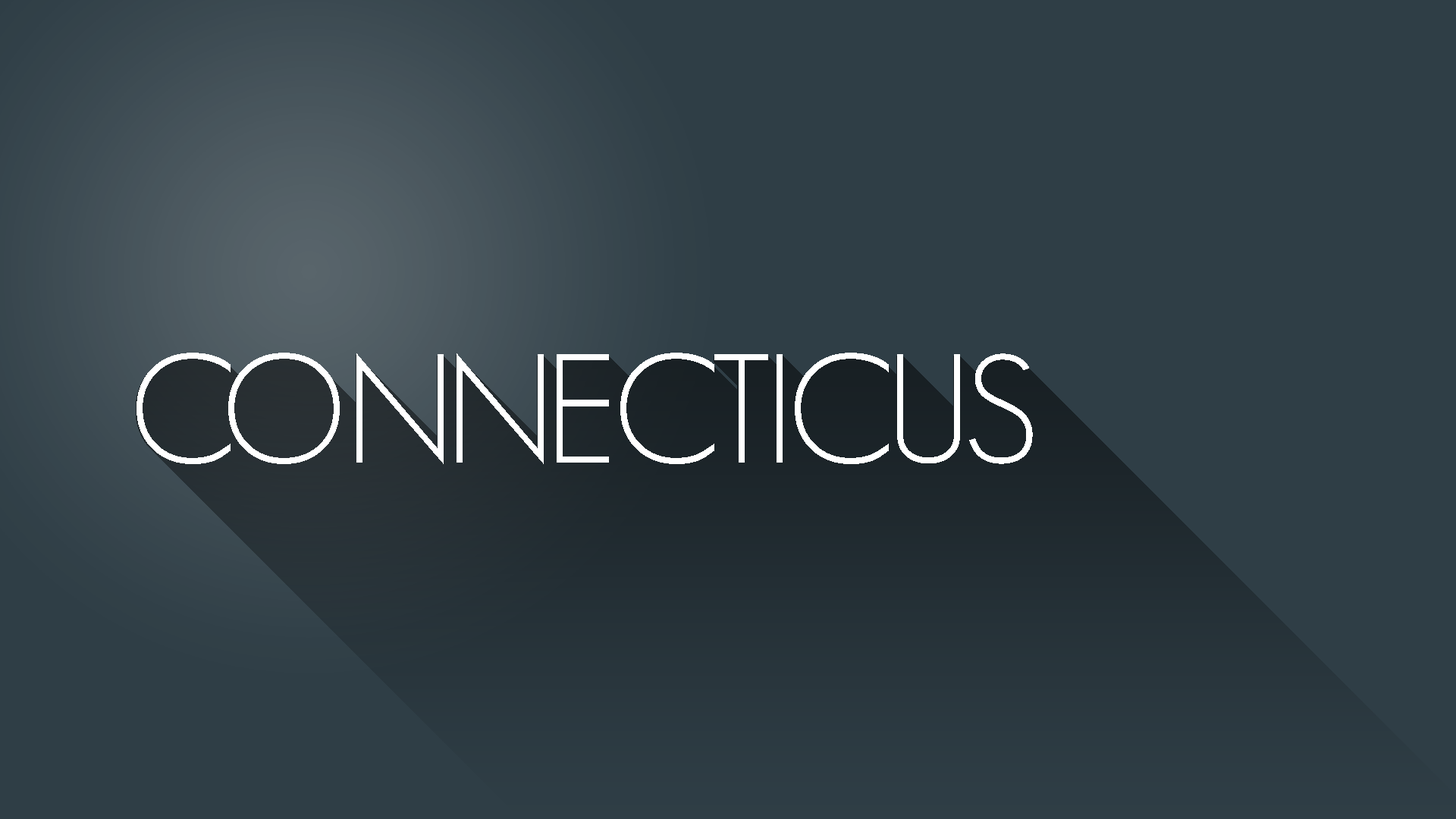
<style>
.page{position:relative;width:1456px;height:819px;background:#2f3e46}
.page>*{position:absolute;margin:0}
.t1{font:151.7px "GeosansLight";color:#ffffff}
</style>
<div class="page">
<p class="t1" style="left:136px;top:353px;width:897px;height:111px">CONNECTICUS</p>
</div>
